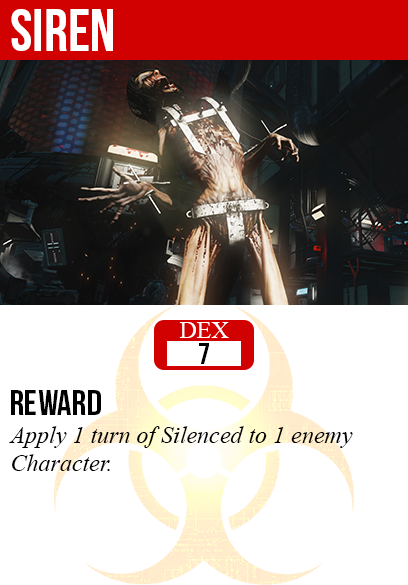
<style>
.page{position:relative;width:408px;height:585px;background:#ffffff}
.page>*{position:absolute;margin:0}
.t1{font:60px "BebasNeue";color:#ffffff}
.t2{font:24px "TimesNewRomanPSMT";color:#ffffff}
.t3{font:30px "BebasNeue";color:#000000}
.t4{font:36px "BebasNeue";color:#000000}
.t5{font:24px "TimesNewRomanPS-ItalicMT";color:#000000}
</style>
<div class="page">
<p class="t1" style="left:11px;top:9px;width:102px;height:42px">siren</p>
<p class="t2" style="left:179px;top:322px;width:50px;height:16px">DEX</p>
<p class="t3" style="left:199px;top:343px;width:10px;height:21px">7</p>
<p class="t4" style="left:11px;top:390px;width:90px;height:25px">reward</p>
<p class="t5" style="left:9px;top:426px;width:344px;height:45px">Apply 1 turn of Silenced to 1 enemy<br>Character.</p>
</div>
